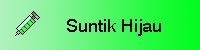
<style>
.page{position:relative;width:200px;height:50px}
.page>*{position:absolute;margin:0}
.t1{font:18px "Swiss721BT-Roman";color:#000000}
</style>
<div class="page">
<p class="t1" style="left:67px;top:19px;width:94px;height:17px">Suntik Hijau</p>
</div>
